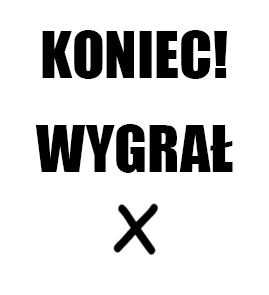
<style>
.page{position:relative;width:269px;height:295px;background:#ffffff}
.page>*{position:absolute;margin:0}
.t1{font:60px "Impact";color:#000000}
</style>
<div class="page">
<p class="t1" style="left:35px;top:30px;width:198px;height:143px;text-align:center">KONIEC!<br><br>WYGRAŁ</p>
</div>
